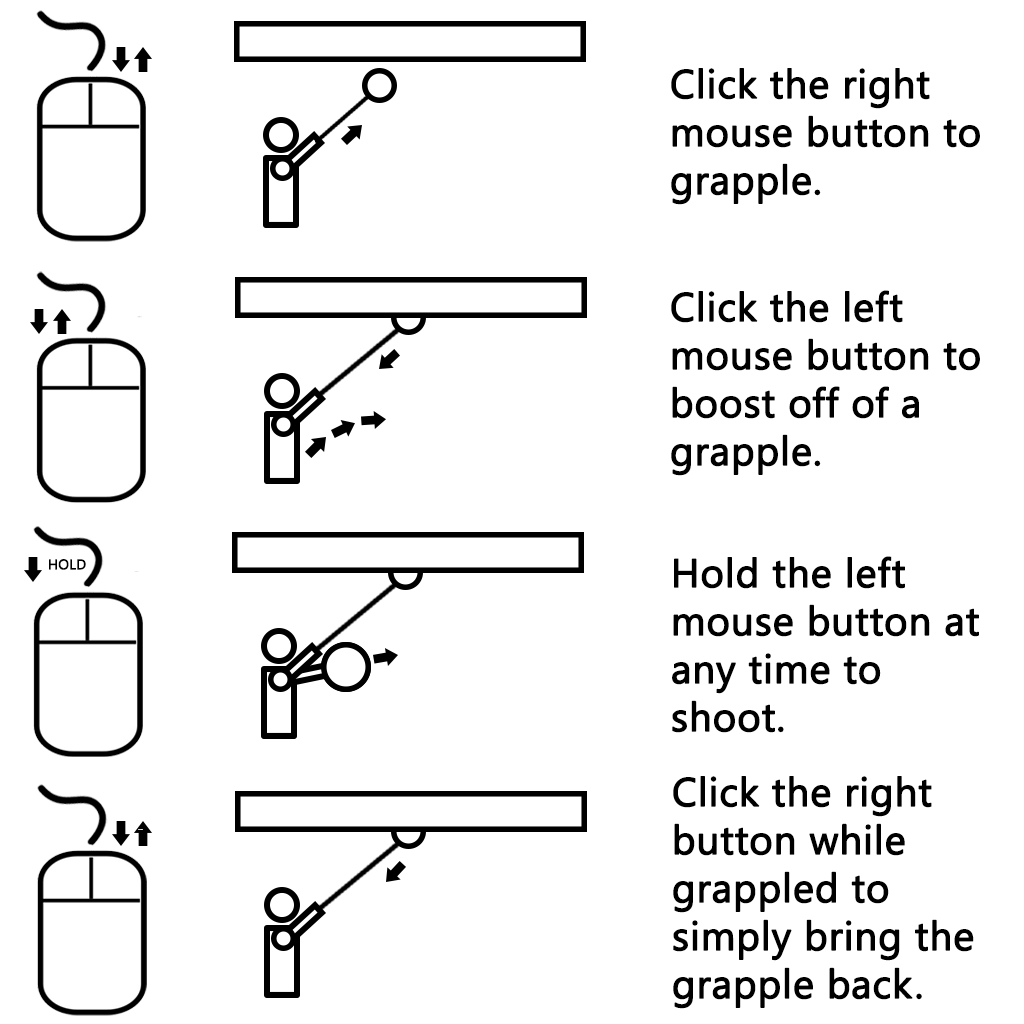
<style>
.page{position:relative;width:1024px;height:1024px;background:#ffffff}
.page>*{position:absolute;margin:0}
.t1{font:40px "SegoeWP";color:#000000;font-weight:bold}
.t2{font:14px "SegoeWP";color:#000000;font-weight:bold}
</style>
<div class="page">
<p class="t1" style="left:671px;top:68px;width:309px;height:137px">Click the right mouse button to grapple.</p>
<p class="t1" style="left:671px;top:290px;width:309px;height:186px">Click the left mouse button to boost off of a grapple.</p>
<p class="t1" style="left:672px;top:556px;width:307px;height:177px">Hold the left mouse button at any time to shoot.</p>
<p class="t2" style="left:49px;top:559px;width:37px;height:11px">HOLD</p>
<p class="t1" style="left:673px;top:776px;width:301px;height:233px">Click the right button while grappled to simply bring the grapple back.</p>
</div>
